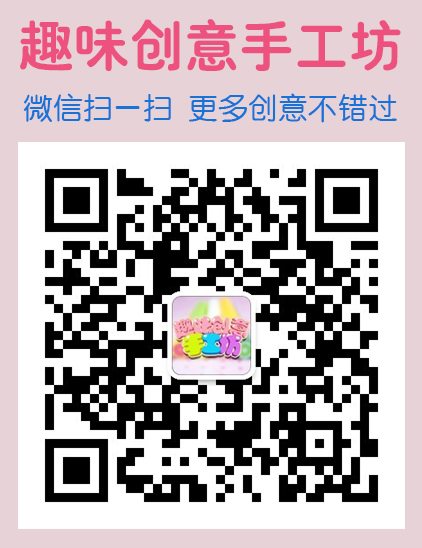
<style>
.page{position:relative;width:422px;height:548px;background:#e7d2d8}
.page>*{position:absolute;margin:0}
.t1{font:55px "HYe4gj";color:#ed517d}
.t2{font:30px "HYe3gj";color:#1973d7}
</style>
<div class="page">
<p class="t1" style="left:20px;top:19px;width:381px;height:52px">趣味创意手工坊</p>
<p class="t2" style="left:23px;top:93px;width:374px;height:30px">微信扫一扫 更多创意不错过</p>
</div>
